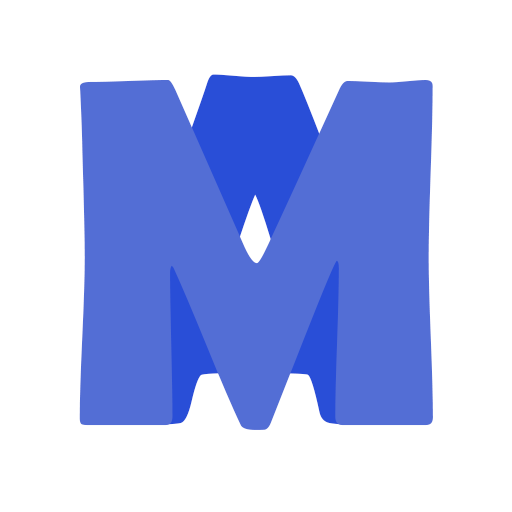
<style>
.page{position:relative;width:512px;height:512px;background:#ffffff}
.page>*{position:absolute;margin:0}
.t1{font:500px "BerlinSansFBDemi-Bold";letter-spacing:-0.005em;scale:0.97 1}
.t2{font:500px "BerlinSansFBDemi-Bold";letter-spacing:-0.005em;color:#536ed5;scale:0.97 1}
</style>
<div class="page">
<p class="t1" style="left:90px;top:74px;width:333px;height:351px">A</p>
<p class="t2" style="left:79px;top:80px;width:354px;height:350px">M</p>
</div>
